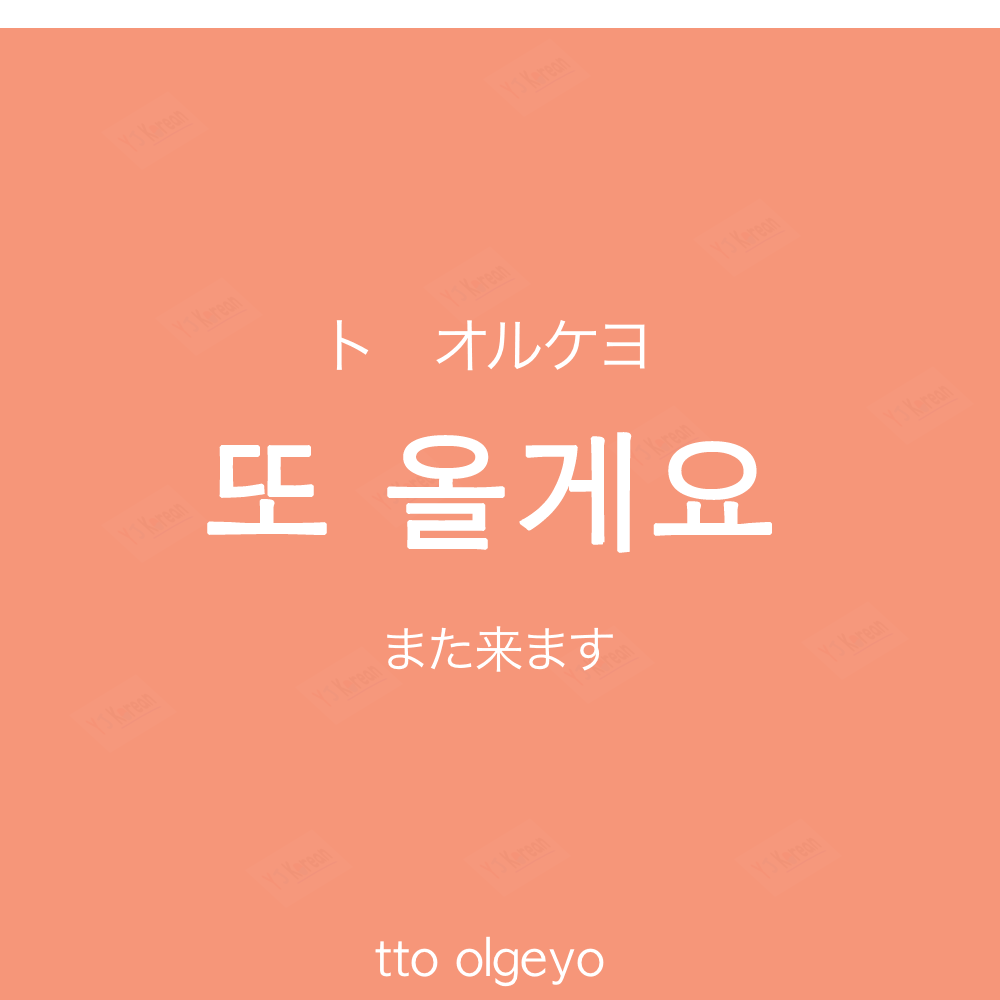
<style>
.page{position:relative;width:1000px;height:1000px;background:#f69679}
.page>*{position:absolute;margin:0}
.t1{font:60px "HiraKakuProN-W3";color:#ffffff;text-transform:uppercase}
.t2{font:130px "AppleGothic";color:#ffffff;font-weight:bold}
.t3{font:50px "HiraKakuProN-W3";color:#ffffff}
.t4{font:50px "AppleGothic";color:#ffffff}
</style>
<div class="page">
<p class="t1" style="left:336px;top:320px;width:309px;height:51px">ト　オルケヨ</p>
<p class="t2" style="left:207px;top:432px;width:565px;height:121px">또 올게요</p>
<p class="t3" style="left:387px;top:626px;width:226px;height:46px">また来ます</p>
<p class="t4" style="left:375px;top:936px;width:229px;height:51px">tto olgeyo</p>
</div>
